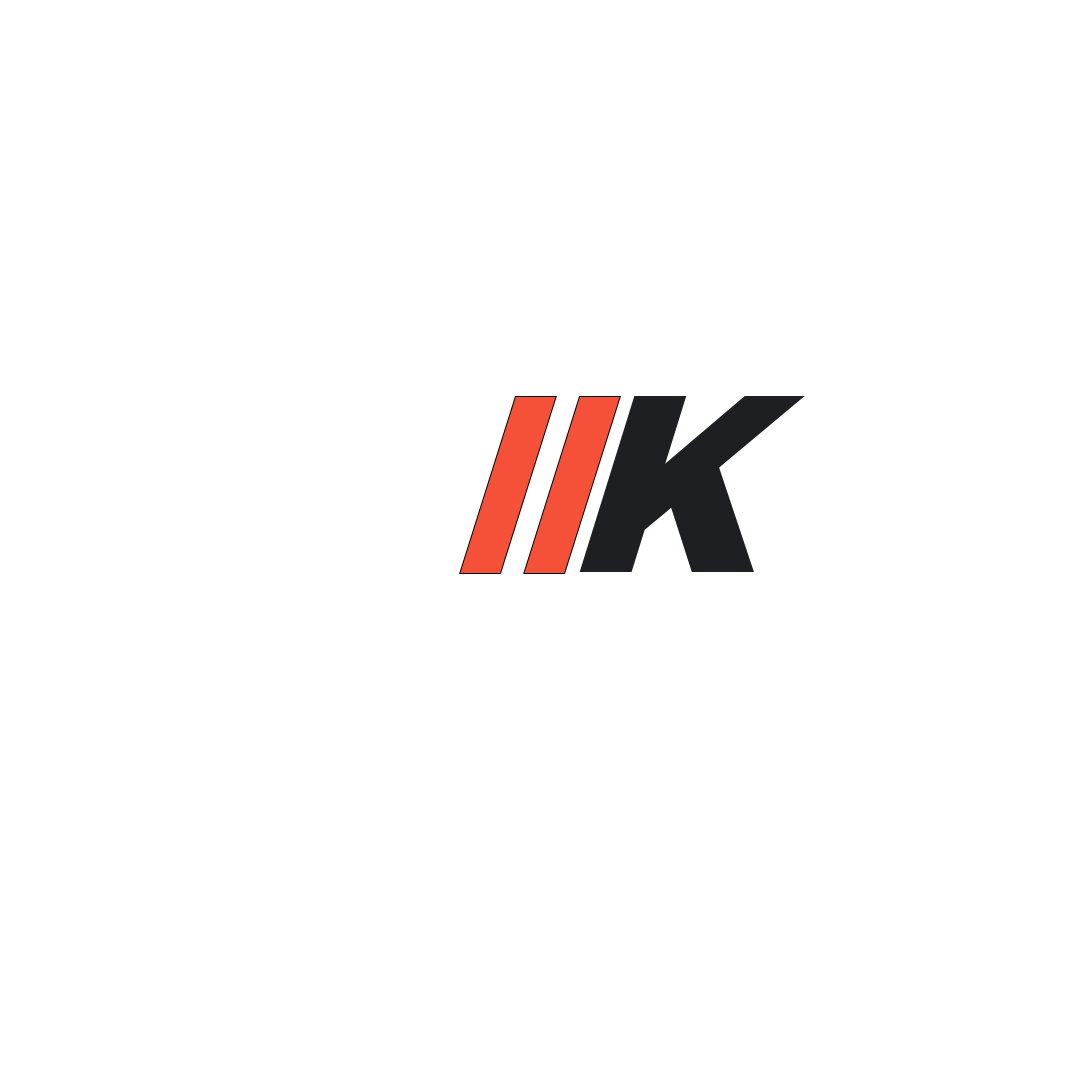
<style>
.page{position:relative;width:1080px;height:1080px;background:#ffffff}
.page>*{position:absolute;margin:0}
.t1{font:263.5px "Montserrat-ExtraBold";letter-spacing:0.06em;color:#1e1f22;text-transform:uppercase;scale:0.95 1}
</style>
<div class="page">
<p class="t1" style="left:579px;top:396px;width:226px;height:176px">K</p>
</div>
